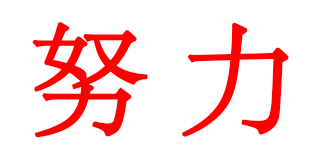
<style>
.page{position:relative;width:320px;height:160px;background:#ffffff}
.page>*{position:absolute;margin:0}
.t1{font:120px "AdobeSongStd-Light";letter-spacing:0.2em;color:#ff0000;font-weight:bold}
</style>
<div class="page">
<p class="t1" style="left:32px;top:21px;width:257px;height:117px">努力</p>
</div>
